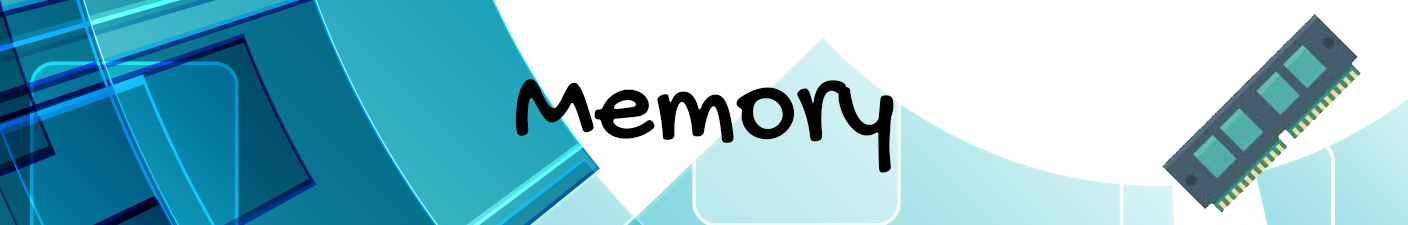
<style>
.page{position:relative;width:1408px;height:225px;background:#ffffff}
.page>*{position:absolute;margin:0}
.t1{font:116.7px "GochiHand-Regular";color:#000000}
</style>
<div class="page">
<p class="t1" style="left:515px;top:79px;width:379px;height:94px">Memory</p>
</div>
